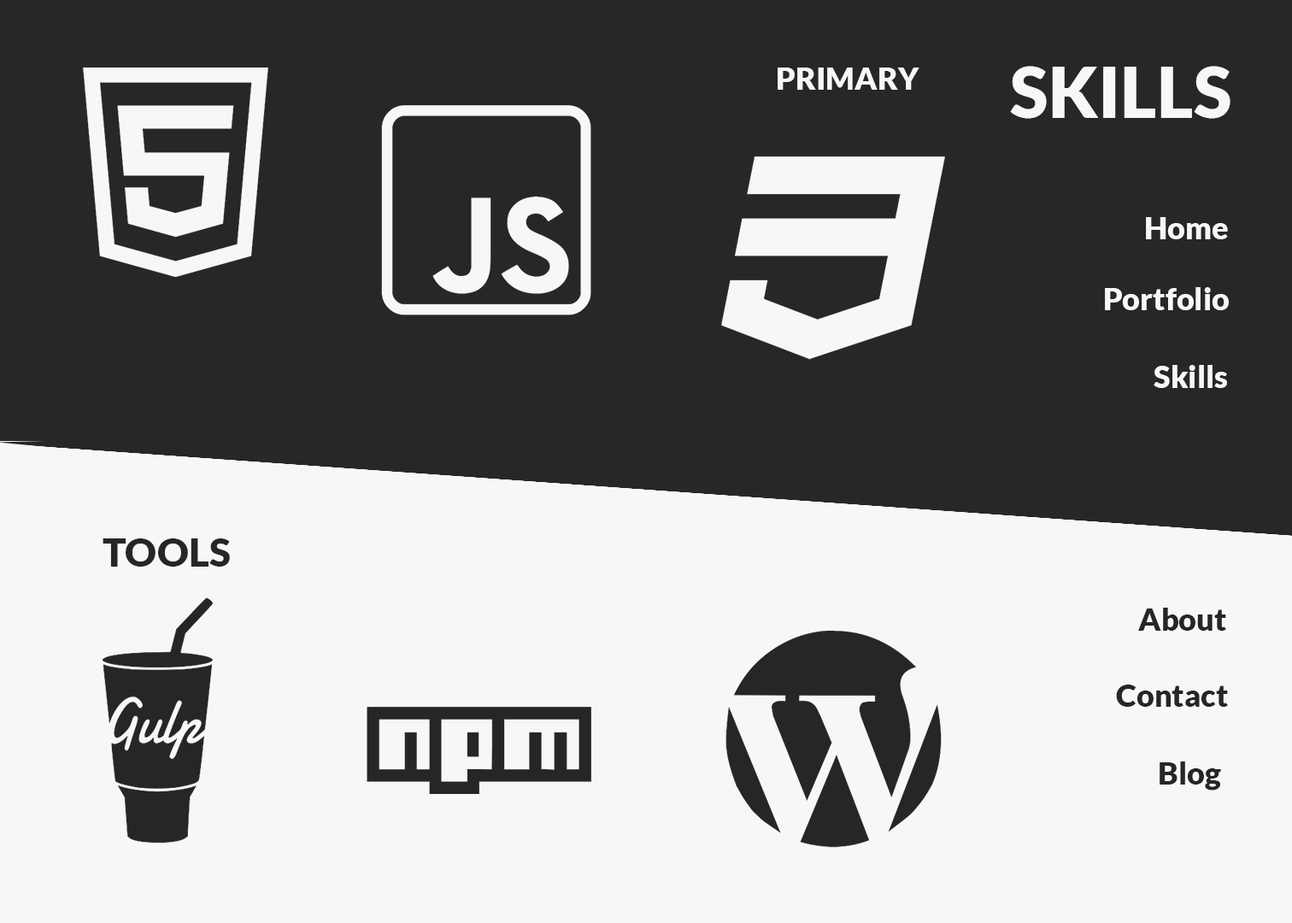
<style>
.page{position:relative;width:1292px;height:923px;background:#272727}
.page>*{position:absolute;margin:0}
.t1{font:70.5px "Lato-Black";color:#f7f7f7}
.t2{font:30.8px "Lato-Black";color:#f7f7f7}
.t3{font:39.3px "Lato-Black";color:#272626}
.t4{font:30.8px "Lato-Black";color:#272626}
</style>
<div class="page">
<p class="t1" style="left:1010px;top:66px;width:221px;height:53px">SKILLS</p>
<p class="t2" style="left:778px;top:68px;width:141px;height:22px">PRIMARY</p>
<p class="t2" style="left:1146px;top:217px;width:82px;height:22px">Home</p>
<p class="t2" style="left:1105px;top:287px;width:124px;height:23px">Portfolio</p>
<p class="t2" style="left:1154px;top:365px;width:73px;height:23px">Skills</p>
<p class="t3" style="left:103px;top:538px;width:127px;height:29px">TOOLS</p>
<p class="t4" style="left:1138px;top:608px;width:88px;height:23px">About</p>
<p class="t4" style="left:1116px;top:684px;width:112px;height:23px">Contact</p>
<p class="t4" style="left:1160px;top:761px;width:61px;height:29px">Blog</p>
</div>
